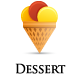
<style>
.page{position:relative;width:80px;height:80px;background:#ffffff}
.page>*{position:absolute;margin:0}
.t1{font:12px "TrajanPro-Regular";letter-spacing:-0.035em;color:#000000;font-weight:bold}
</style>
<div class="page">
<p class="t1" style="left:15px;top:63px;width:51px;height:11px">Dessert</p>
</div>
